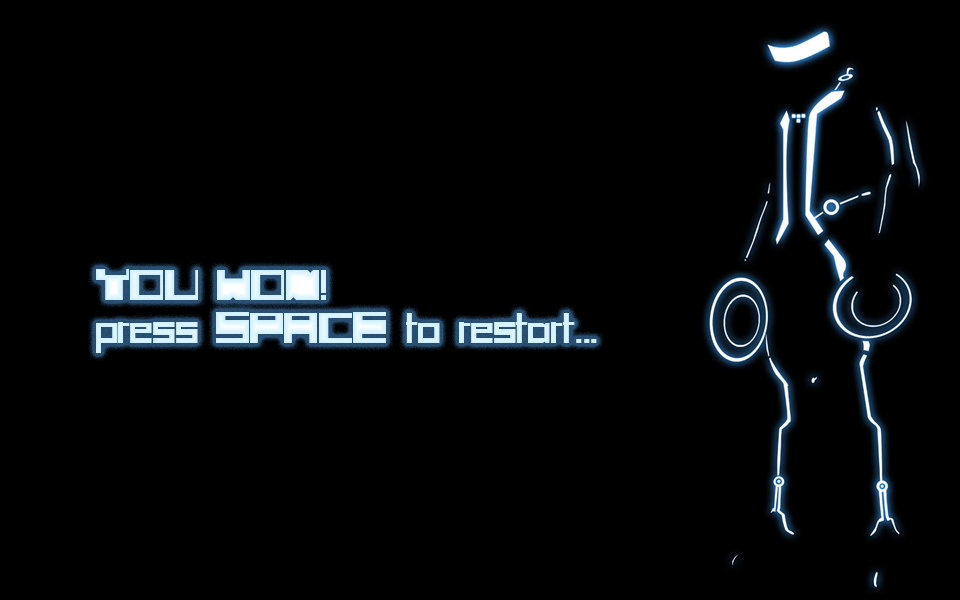
<style>
.page{position:relative;width:960px;height:600px;background:#000000}
.page>*{position:absolute;margin:0}
.t1{font:36px "SCIFIBOX";color:#d5f2ff}
</style>
<div class="page">
<p class="t1" style="left:96px;top:269px;width:501px;height:84px">YOU WON!<br>press SPACE to restart...</p>
</div>
